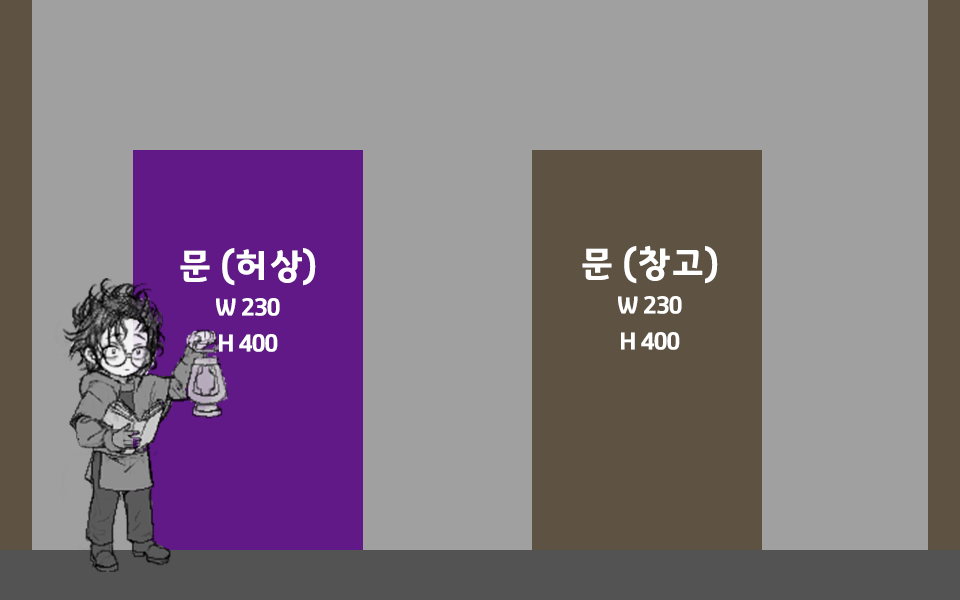
<style>
.page{position:relative;width:960px;height:600px;background:#a0a0a0}
.page>*{position:absolute;margin:0}
.t1{font:24px/36px "GyeonggiTitleV";letter-spacing:-0.05em;color:#ffffff}
.t2{font:36px/12px "GyeonggiTitleV";letter-spacing:-0.05em;color:#ffffff}
</style>
<div class="page">
<p class="t1" style="left:582px;top:245px;width:136px;height:105px;text-align:center"><span class="t2">문 (창고)<br><br><br><br></span>W 230<br>H 400</p>
<p class="t1" style="left:180px;top:248px;width:136px;height:104px;text-align:center"><span class="t2">문 (허상)<br><br><br><br></span>W 230<br>H 400</p>
</div>
